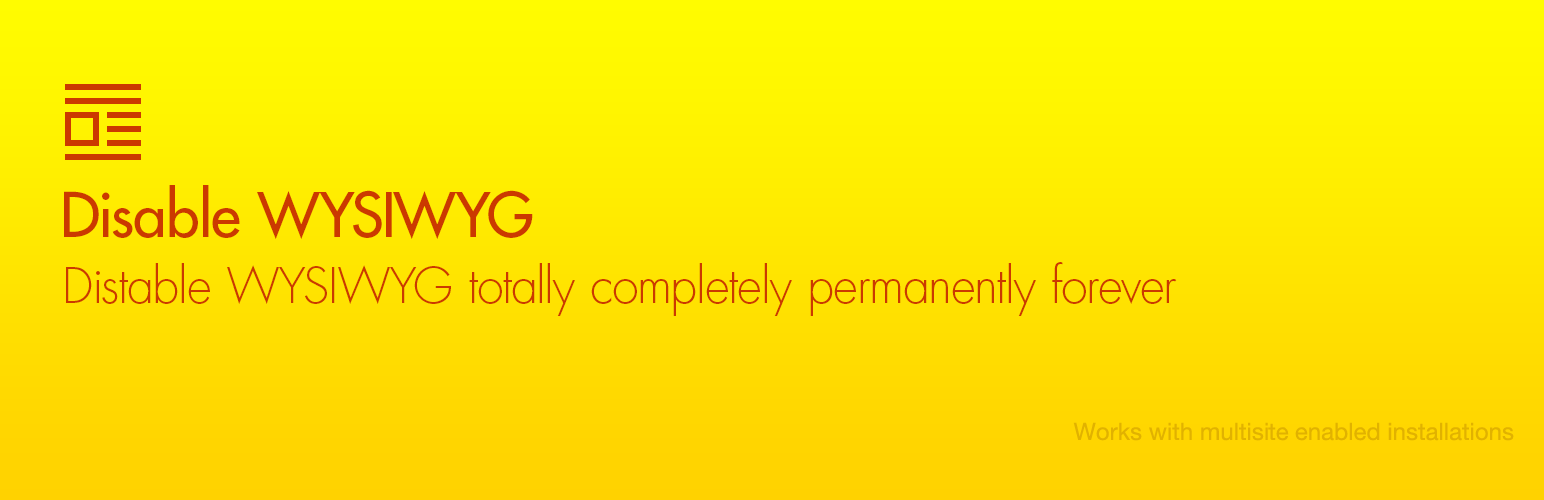
<style>
.page{position:relative;width:1544px;height:500px}
.page>*{position:absolute;margin:0}
.t1{font:60px "FuturaLTPro-Medium";color:#cb3900}
.t2{font:48px "FuturaStd-Light";color:#cb3900}
.t3{font:24px "HelveticaNeue";color:#e1b200}
</style>
<div class="page">
<p class="t1" style="left:64px;top:185px;width:469px;height:54px">Disable WYSIWYG</p>
<p class="t2" style="left:66px;top:262px;width:1111px;height:54px">Distable WYSIWYG totally completely permanently forever</p>
<p class="t3" style="left:1073px;top:422px;width:441px;height:19px">Works with multisite enabled installations</p>
</div>
